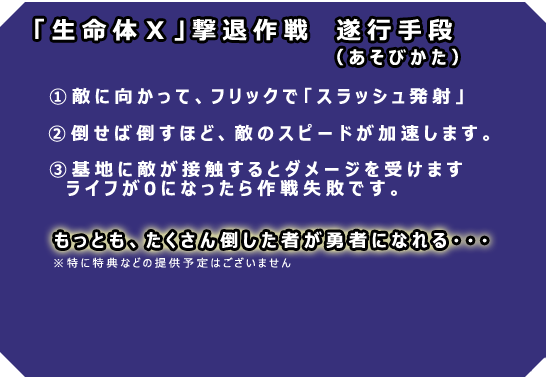
<style>
.page{position:relative;width:546px;height:380px;background:#37307b}
.page>*{position:absolute;margin:0}
.t1{font:24px "MeiryoUI-Bold";letter-spacing:0.26em;color:#ffffff}
.t2{font:18px "MeiryoUI-Bold";letter-spacing:0.26em;color:#ffffff}
.t3{font:18px/19px "MeiryoUI-Bold";letter-spacing:0.26em;color:#ffffff}
.t4{font:11px "MeiryoUI";letter-spacing:0.26em;color:#ffffff}
</style>
<div class="page">
<p class="t1" style="left:35px;top:18px;width:417px;height:23px">「生命体Ｘ」撃退作戦　遂行手段</p>
<p class="t2" style="left:337px;top:48px;width:121px;height:18px">（あそびかた）</p>
<p class="t2" style="left:49px;top:87px;width:414px;height:18px">①敵に向かって、フリックで「スラッシュ発射」</p>
<p class="t2" style="left:48px;top:123px;width:442px;height:19px">②倒せば倒すほど、敵のスピードが加速します。</p>
<p class="t3" style="left:49px;top:159px;width:413px;height:38px">③基地に敵が接触するとダメージを受けます<br>　ライフが0になったら作戦失敗です。</p>
<p class="t2" style="left:55px;top:231px;width:432px;height:18px">もっとも、たくさん倒した者が勇者になれる・・・</p>
<p class="t4" style="left:54px;top:257px;width:237px;height:11px">※特に特典などの提供予定はございません</p>
</div>
